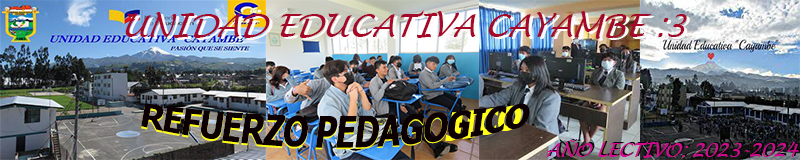
<style>
.page{position:relative;width:800px;height:160px}
.page>*{position:absolute;margin:0}
.t1{font:32px "LucidaHandwriting-Italic";letter-spacing:-0.025em;color:#a5092a;font-style:italic}
.t2{font:32px "LucidaHandwriting-Italic";letter-spacing:-0.025em;color:#fdf9f9;font-style:italic}
.t3{font:32px "Tahoma-Bold";letter-spacing:-0.025em;color:#0c0003;font-style:italic}
.t4{font:18.7px "LucidaHandwriting-Italic";letter-spacing:-0.025em;color:#d00b8d;font-style:italic}
.t5{font:18.7px "LucidaHandwriting-Italic";letter-spacing:-0.025em;font-style:italic}
</style>
<div class="page">
<p class="t1" style="left:125px;top:10px;width:562px;height:29px">UNIDAD EDUCATIVA CAYAMBE :3</p>
<p class="t2" style="left:128px;top:12px;width:562px;height:29px">UNIDAD EDUCATIVA CAYAMBE :3</p>
<p class="t3" style="left:141px;top:105px;width:381px;height:45px">REFUERZO PEDAGOJICO</p>
<p class="t3" style="left:141px;top:103px;width:389px;height:45px">REFUERZO PEDAGOGICO</p>
<p class="t4" style="left:546px;top:140px;width:253px;height:18px">AÑO LECTIVO: 2023-2024</p>
<p class="t5" style="left:548px;top:139px;width:253px;height:18px">AÑO LECTIVO: 2023-2024</p>
</div>
